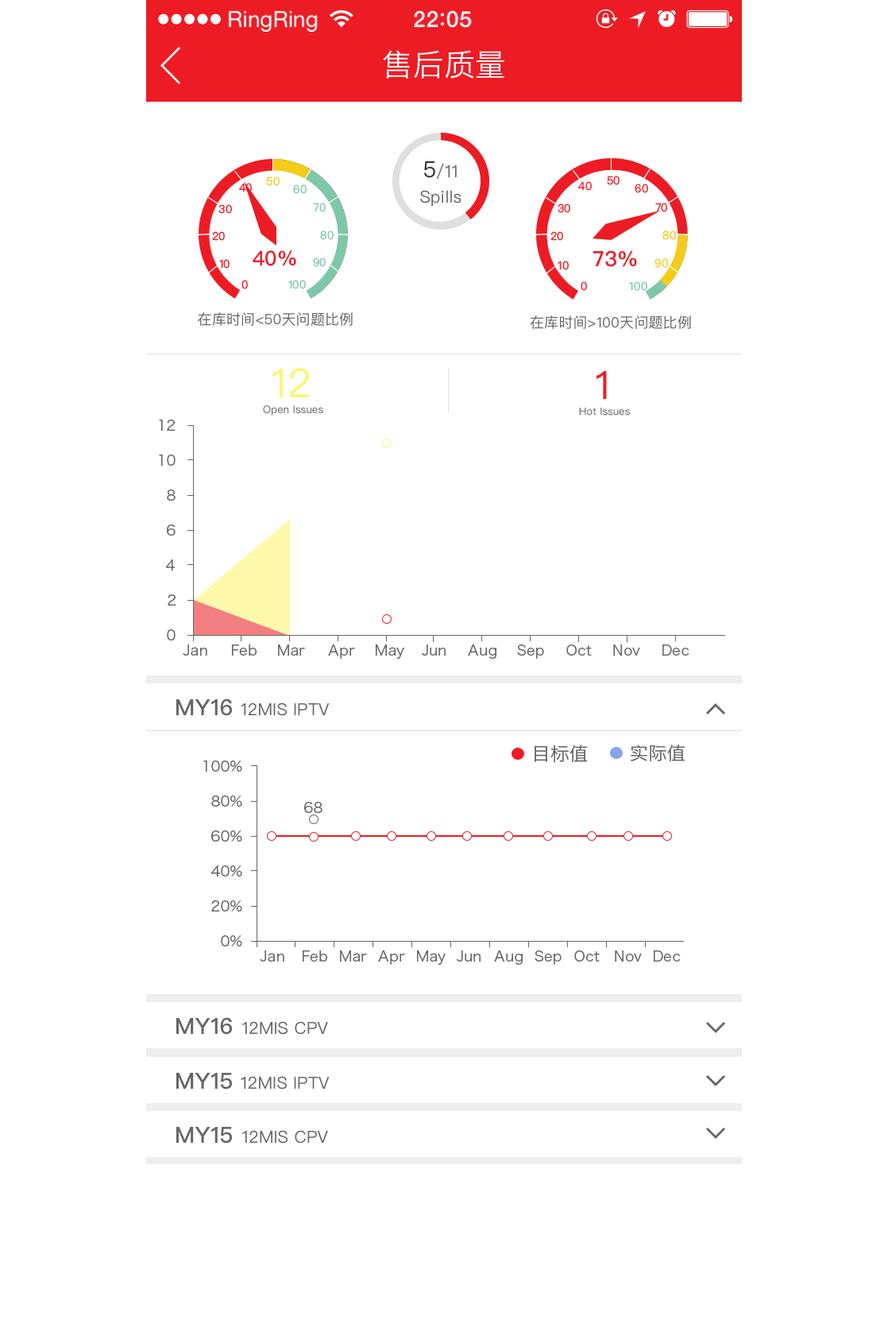
<style>
.page{position:relative;width:888px;height:1343px;background:#ffffff}
.page>*{position:absolute;margin:0}
.t1{font:22.3px "HelveticaNeue";color:#ffffff}
.t2{font:22.3px "HelveticaNeue-Medium";letter-spacing:0.03em;color:#ffffff}
.t3{font:30.7px "HiraginoSansGB-W3";letter-spacing:0.01em;color:#ffffff}
.t4{font:22.2px "PingFangSC-Regular";letter-spacing:0.01em;color:#333333}
.t5{font:16.7px "PingFangSC-Regular";letter-spacing:0.01em;color:#666666}
.t6{font:11.1px "PingFangSC-Regular";letter-spacing:0.01em;color:#ed1c24}
.t7{font:11.1px "PingFangSC-Regular";letter-spacing:0.01em;color:#f4cb1a}
.t8{font:11.1px "PingFangSC-Regular";letter-spacing:0.01em;color:#7ec8aa}
.t9{font:20.4px "PingFangSC-Medium";letter-spacing:0.01em;color:#ed1c24}
.t10{font:21.1px "PingFangSC-Medium";letter-spacing:0.01em;color:#ed1c24}
.t11{font:14.3px "PingFangSC-Regular";letter-spacing:0.01em;color:#666666}
.t12{font:40px "PingFangSC-Regular";letter-spacing:0.01em;color:#fef373}
.t13{font:39.4px "PingFangSC-Regular";letter-spacing:0.01em;color:#ed1c24}
.t14{font:10.5px "PingFangSC-Regular";letter-spacing:0.01em;color:#666666}
.t15{font:10.3px "PingFangSC-Regular";letter-spacing:0.01em;color:#666666}
.t16{font:14.3px "HiraginoSansGB-W3";letter-spacing:0.01em;color:#666666}
.t17{font:22.2px "PingFangSC-Medium";letter-spacing:0.01em;color:#666666}
.t18{font:18.4px "HiraginoSansGB-W3";letter-spacing:0.01em;color:#666666}
.t19{font:17.6px "HiraginoSansGB-W3";letter-spacing:0.01em;color:#666666;scale:1.05 1}
</style>
<div class="page">
<p class="t1" style="left:228px;top:10px;width:90px;height:22px">RingRing</p>
<p class="t2" style="left:414px;top:10px;width:58px;height:18px">22 05</p>
<p class="t3" style="left:383px;top:50px;width:121px;height:29px">售后质量</p>
<p class="t4" style="left:424px;top:161px;width:11px;height:17px">5</p>
<p class="t5" style="left:436px;top:163px;width:21px;height:17px">/11</p>
<p class="t6" style="left:239px;top:183px;width:13px;height:9px">40</p>
<p class="t7" style="left:266px;top:176px;width:14px;height:10px">50</p>
<p class="t8" style="left:293px;top:184px;width:14px;height:10px">60</p>
<p class="t6" style="left:578px;top:181px;width:14px;height:10px">40</p>
<p class="t6" style="left:607px;top:176px;width:13px;height:9px">50</p>
<p class="t6" style="left:635px;top:184px;width:13px;height:9px">60</p>
<p class="t5" style="left:420px;top:190px;width:42px;height:17px">Spills</p>
<p class="t6" style="left:218px;top:204px;width:14px;height:10px">30</p>
<p class="t8" style="left:313px;top:203px;width:13px;height:9px">70</p>
<p class="t6" style="left:558px;top:203px;width:12px;height:10px">30</p>
<p class="t6" style="left:655px;top:203px;width:12px;height:9px">70</p>
<p class="t6" style="left:212px;top:231px;width:13px;height:10px">20</p>
<p class="t8" style="left:320px;top:230px;width:14px;height:10px">80</p>
<p class="t6" style="left:551px;top:231px;width:12px;height:10px">20</p>
<p class="t7" style="left:663px;top:230px;width:13px;height:10px">80</p>
<p class="t9" style="left:253px;top:250px;width:43px;height:16px">40%</p>
<p class="t8" style="left:313px;top:257px;width:13px;height:10px">90</p>
<p class="t10" style="left:593px;top:250px;width:44px;height:17px">73%</p>
<p class="t6" style="left:219px;top:259px;width:11px;height:10px">10</p>
<p class="t6" style="left:558px;top:261px;width:11px;height:9px">10</p>
<p class="t7" style="left:655px;top:258px;width:13px;height:10px">90</p>
<p class="t6" style="left:242px;top:280px;width:6px;height:9px">0</p>
<p class="t8" style="left:288px;top:280px;width:18px;height:9px">100</p>
<p class="t6" style="left:581px;top:281px;width:6px;height:10px">0</p>
<p class="t8" style="left:629px;top:281px;width:18px;height:10px">100</p>
<p class="t11" style="left:198px;top:312px;width:155px;height:14px">在库时间&lt;50天问题比例</p>
<p class="t11" style="left:530px;top:315px;width:161px;height:14px">在库时间&gt;100天问题比例</p>
<p class="t12" style="left:272px;top:367px;width:37px;height:30px">12</p>
<p class="t13" style="left:597px;top:370px;width:10px;height:29px">1</p>
<p class="t14" style="left:263px;top:405px;width:60px;height:10px">Open Issues</p>
<p class="t15" style="left:579px;top:408px;width:51px;height:7px">Hot Issues</p>
<p class="t16" style="left:159px;top:419px;width:17px;height:12px">12</p>
<p class="t16" style="left:159px;top:454px;width:17px;height:12px">10</p>
<p class="t16" style="left:167px;top:489px;width:9px;height:11px">8</p>
<p class="t16" style="left:167px;top:524px;width:9px;height:11px">6</p>
<p class="t16" style="left:166px;top:559px;width:10px;height:11px">4</p>
<p class="t16" style="left:168px;top:594px;width:8px;height:11px">2</p>
<p class="t16" style="left:167px;top:629px;width:9px;height:11px">0</p>
<p class="t16" style="left:183px;top:644px;width:24px;height:11px">Jan</p>
<p class="t16" style="left:231px;top:644px;width:26px;height:11px">Feb</p>
<p class="t16" style="left:277px;top:644px;width:28px;height:11px">Mar</p>
<p class="t16" style="left:328px;top:644px;width:27px;height:15px">Apr</p>
<p class="t16" style="left:375px;top:644px;width:29px;height:15px">May</p>
<p class="t16" style="left:422px;top:644px;width:24px;height:11px">Jun</p>
<p class="t16" style="left:468px;top:644px;width:29px;height:15px">Aug</p>
<p class="t16" style="left:517px;top:644px;width:27px;height:15px">Sep</p>
<p class="t16" style="left:566px;top:644px;width:26px;height:11px">Oct</p>
<p class="t16" style="left:613px;top:644px;width:27px;height:11px">Nov</p>
<p class="t16" style="left:662px;top:644px;width:28px;height:11px">Dec</p>
<p class="t17" style="left:176px;top:698px;width:57px;height:18px">MY16</p>
<p class="t5" style="left:241px;top:702px;width:89px;height:14px">12MIS IPTV</p>
<p class="t18" style="left:535px;top:744px;width:53px;height:19px">目标值</p>
<p class="t19" style="left:631px;top:744px;width:54px;height:17px">实际值</p>
<p class="t16" style="left:203px;top:760px;width:39px;height:11px">100%</p>
<p class="t16" style="left:211px;top:795px;width:31px;height:11px">80%</p>
<p class="t16" style="left:304px;top:802px;width:19px;height:11px">68</p>
<p class="t16" style="left:211px;top:830px;width:31px;height:11px">60%</p>
<p class="t16" style="left:211px;top:865px;width:31px;height:11px">40%</p>
<p class="t16" style="left:211px;top:900px;width:31px;height:11px">20%</p>
<p class="t16" style="left:221px;top:935px;width:21px;height:11px">0%</p>
<p class="t16" style="left:260px;top:950px;width:24px;height:11px">Jan</p>
<p class="t16" style="left:302px;top:950px;width:25px;height:11px">Feb</p>
<p class="t16" style="left:339px;top:950px;width:28px;height:11px">Mar</p>
<p class="t16" style="left:378px;top:950px;width:27px;height:14px">Apr</p>
<p class="t16" style="left:416px;top:950px;width:30px;height:14px">May</p>
<p class="t16" style="left:457px;top:950px;width:24px;height:11px">Jun</p>
<p class="t16" style="left:494px;top:950px;width:30px;height:14px">Aug</p>
<p class="t16" style="left:535px;top:950px;width:27px;height:14px">Sep</p>
<p class="t16" style="left:574px;top:950px;width:26px;height:11px">Oct</p>
<p class="t16" style="left:615px;top:950px;width:27px;height:11px">Nov</p>
<p class="t16" style="left:653px;top:950px;width:28px;height:11px">Dec</p>
<p class="t17" style="left:176px;top:1017px;width:57px;height:17px">MY16</p>
<p class="t5" style="left:242px;top:1021px;width:86px;height:13px">12MIS CPV</p>
<p class="t17" style="left:176px;top:1072px;width:57px;height:17px">MY15</p>
<p class="t5" style="left:241px;top:1076px;width:89px;height:13px">12MIS IPTV</p>
<p class="t17" style="left:176px;top:1126px;width:57px;height:17px">MY15</p>
<p class="t5" style="left:242px;top:1130px;width:86px;height:13px">12MIS CPV</p>
</div>
